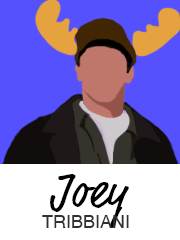
<style>
.page{position:relative;width:180px;height:240px;background:#5551ff}
.page>*{position:absolute;margin:0}
.t1{font:48px "MarketPro";color:#000000}
.t2{font:18px "Helvetica";color:#313131;text-transform:uppercase}
</style>
<div class="page">
<p class="t1" style="left:50px;top:174px;width:79px;height:54px">Joey</p>
<p class="t2" style="left:42px;top:215px;width:87px;height:13px">Tribbiani</p>
</div>
